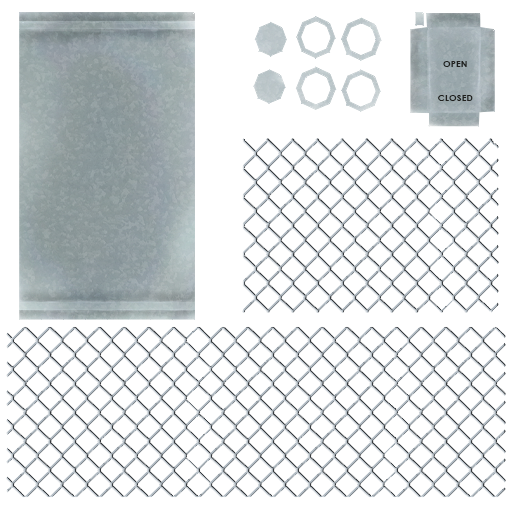
<style>
.page{position:relative;width:512px;height:512px;background:#ffffff}
.page>*{position:absolute;margin:0}
.t1{font:9.3px "CenturyGothic-Bold";color:#20201e}
</style>
<div class="page">
<p class="t1" style="left:438px;top:61px;width:35px;height:40px;text-align:center">OPEN<br><br><br>CLOSED</p>
</div>
